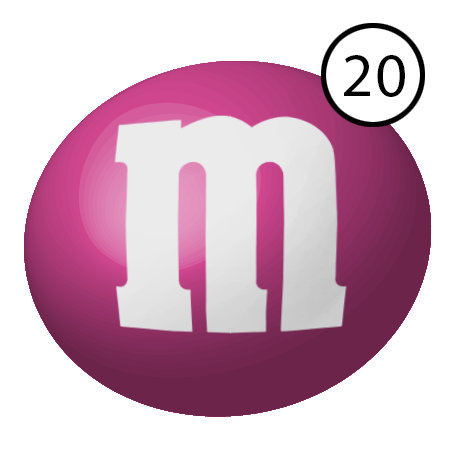
<style>
.page{position:relative;width:451px;height:450px;background:#ffffff}
.page>*{position:absolute;margin:0}
.t1{font:62.5px "MyriadPro-Regular";letter-spacing:0.02em;color:#000000}
</style>
<div class="page">
<p class="t1" style="left:344px;top:55px;width:61px;height:42px">20</p>
</div>
